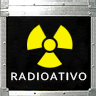
<style>
.page{position:relative;width:96px;height:96px}
.page>*{position:absolute;margin:0}
.t1{font:10.7px "CorporateS";letter-spacing:0.075em;color:#ffffff;scale:1.24 1}
</style>
<div class="page">
<p class="t1" style="left:11px;top:72px;width:76px;height:9px">RADIOATIVO</p>
</div>
